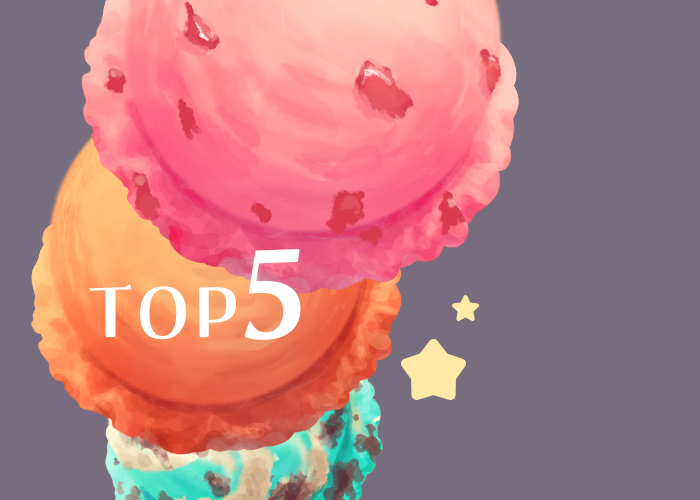
<style>
.page{position:relative;width:700px;height:500px;background:#776d7f}
.page>*{position:absolute;margin:0}
.t1{font:125px "ADS-shiokaze";color:#ffffff}
.t2{font:71px "ADS-shiokaze";letter-spacing:0.01em;color:#ffffff}
</style>
<div class="page">
<p class="t1" style="left:244px;top:249px;width:57px;height:91px">５</p>
<p class="t2" style="left:89px;top:284px;width:147px;height:56px">TOP</p>
</div>
